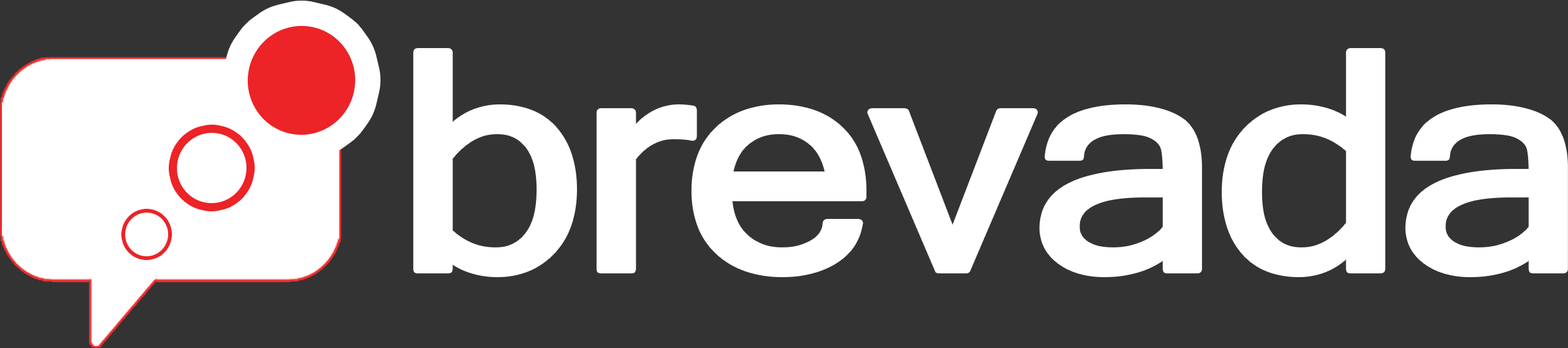
<style>
.page{position:relative;width:1568px;height:348px;background:#333333}
.page>*{position:absolute;margin:0}
.t1{font:303.8px "MicrosoftSansSerif";letter-spacing:-0.025em;color:#ffffff;scale:1.13 1}
</style>
<div class="page">
<p class="t1" style="left:416px;top:52px;width:1148px;height:221px">brevada</p>
</div>
